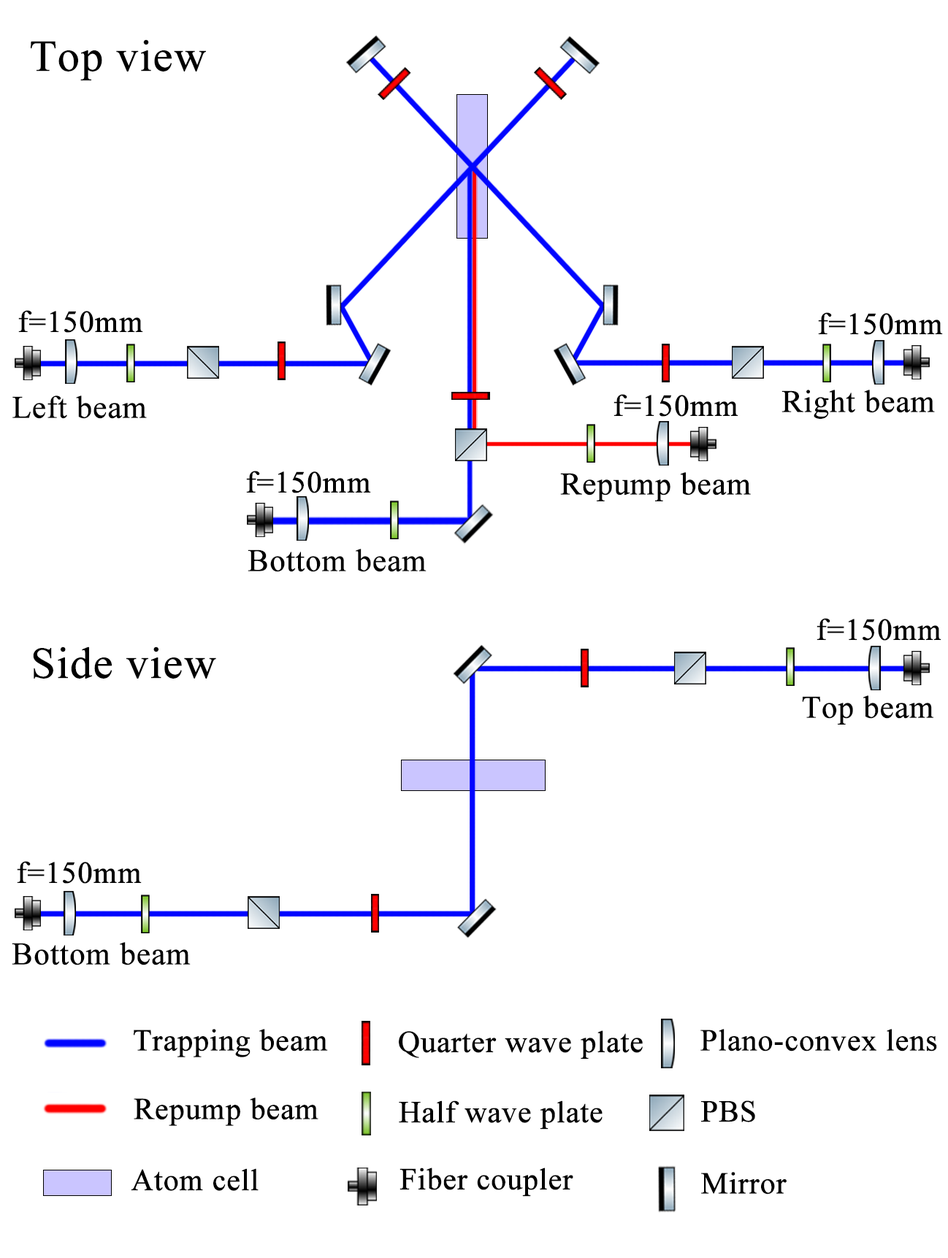
<style>
.page{position:relative;width:948px;height:1258px;background:#ffffff}
.page>*{position:absolute;margin:0}
.t1{font:44.2px "TimesNewRomanPSMT";color:#000000;font-weight:bold}
.t2{font:30.4px "TimesNewRomanPSMT";color:#000000;font-weight:bold}
.t3{font:31.4px "TimesNewRomanPSMT";color:#000000;font-weight:bold}
</style>
<div class="page">
<p class="t1" style="left:31px;top:39px;width:175px;height:42px">Top view</p>
<p class="t2" style="left:18px;top:310px;width:125px;height:23px">f=150mm</p>
<p class="t2" style="left:818px;top:312px;width:124px;height:23px">f=150mm</p>
<p class="t3" style="left:781px;top:390px;width:153px;height:29px">Right beam</p>
<p class="t3" style="left:12px;top:396px;width:135px;height:23px">Left beam</p>
<p class="t2" style="left:613px;top:394px;width:125px;height:23px">f=150mm</p>
<p class="t2" style="left:246px;top:471px;width:125px;height:22px">f=150mm</p>
<p class="t3" style="left:560px;top:472px;width:190px;height:29px">Repump beam</p>
<p class="t3" style="left:247px;top:549px;width:179px;height:23px">Bottom beam</p>
<p class="t2" style="left:816px;top:618px;width:125px;height:23px">f=150mm</p>
<p class="t1" style="left:33px;top:647px;width:183px;height:32px">Side view</p>
<p class="t3" style="left:802px;top:696px;width:131px;height:29px">Top beam</p>
<p class="t2" style="left:17px;top:861px;width:125px;height:23px">f=150mm</p>
<p class="t3" style="left:12px;top:942px;width:179px;height:24px">Bottom beam</p>
<p class="t2" style="left:134px;top:1029px;width:194px;height:29px">Trapping beam</p>
<p class="t2" style="left:399px;top:1031px;width:243px;height:28px">Quarter wave plate</p>
<p class="t2" style="left:700px;top:1029px;width:237px;height:23px">Plano-convex lens</p>
<p class="t2" style="left:134px;top:1098px;width:184px;height:28px">Repump beam</p>
<p class="t2" style="left:399px;top:1101px;width:203px;height:29px">Half wave plate</p>
<p class="t2" style="left:701px;top:1101px;width:54px;height:22px">PBS</p>
<p class="t2" style="left:131px;top:1169px;width:127px;height:22px">Atom cell</p>
<p class="t2" style="left:399px;top:1168px;width:174px;height:29px">Fiber coupler</p>
<p class="t2" style="left:701px;top:1172px;width:85px;height:23px">Mirror</p>
</div>
